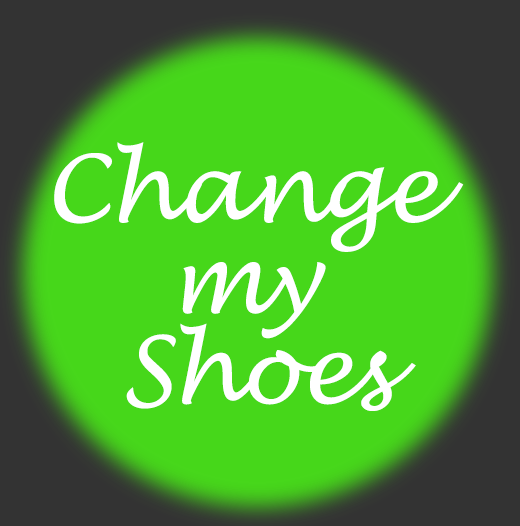
<style>
.page{position:relative;width:520px;height:526px;background:#46d71a}
.page>*{position:absolute;margin:0}
.t1{font:92.7px/90.7px "LucidaHandwriting-Italic";letter-spacing:-0.02em;color:#ffffff}
</style>
<div class="page">
<p class="t1" style="left:54px;top:142px;width:410px;height:269px;text-align:center">Change <br>my <br>Shoes</p>
</div>
